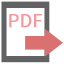
<style>
.page{position:relative;width:64px;height:64px;background:#ffffff}
.page>*{position:absolute;margin:0}
.t1{font:20px "SourceSansPro-Regular";color:#f5989d;font-weight:bold}
</style>
<div class="page">
<p class="t1" style="left:9px;top:14px;width:33px;height:14px">PDF</p>
</div>
